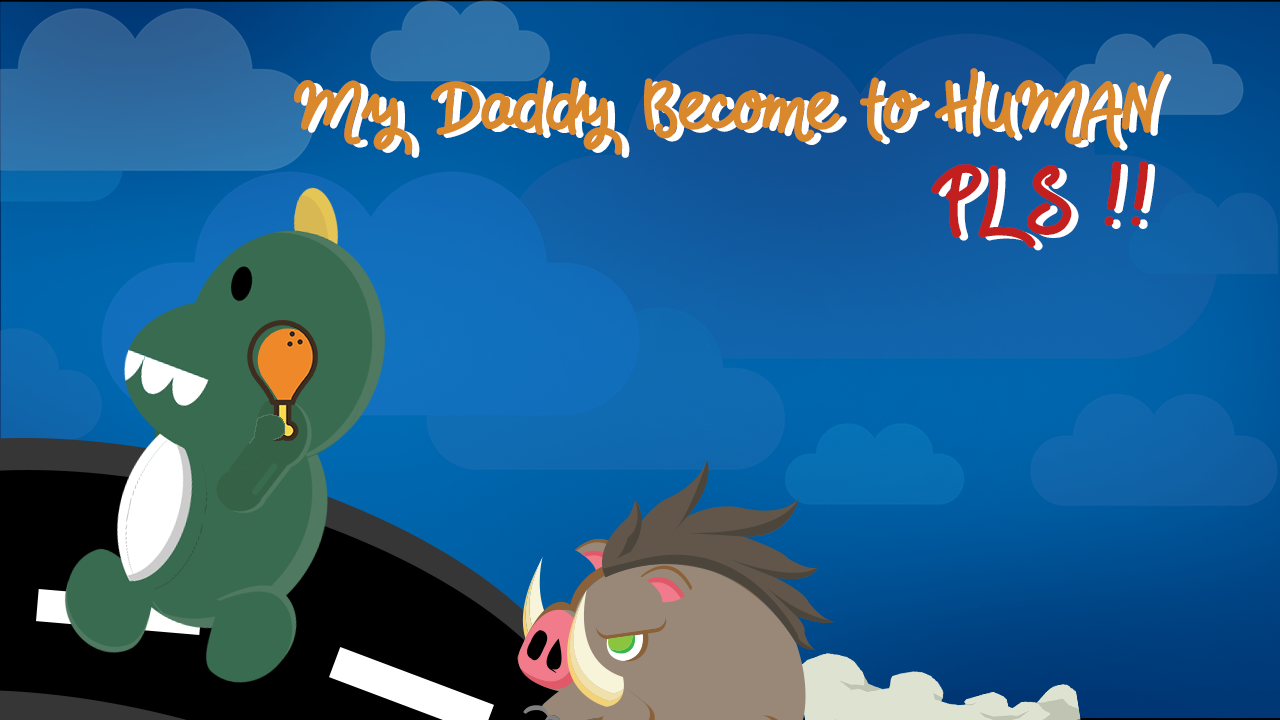
<style>
.page{position:relative;width:1280px;height:720px}
.page>*{position:absolute;margin:0}
.t1{font:60px "HandsDown";color:#d9892b}
.t2{font:60px "HandsDown";color:#ffffff}
.t3{font:72px "HandsDown";color:#c31f1f}
.t4{font:72px "HandsDown"}
</style>
<div class="page">
<p class="t1" style="left:294px;top:68px;width:871px;height:87px">My Daddy Become to HUMAN</p>
<p class="t2" style="left:301px;top:71px;width:871px;height:87px">My Daddy Become to HUMAN</p>
<p class="t3" style="left:931px;top:161px;width:217px;height:87px">PLS !!</p>
<p class="t4" style="left:938px;top:164px;width:217px;height:87px">PLS !!</p>
</div>
